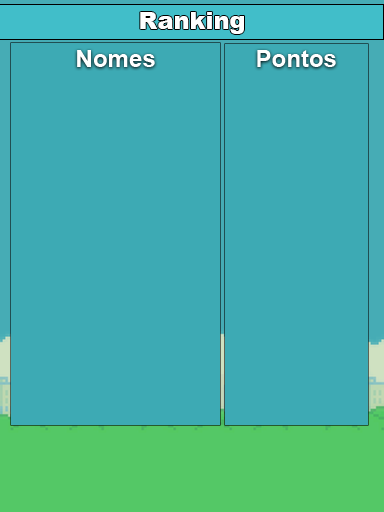
<style>
.page{position:relative;width:384px;height:512px;background:#3daab4}
.page>*{position:absolute;margin:0}
.t1{font:24px "Arial-Black";color:#ffffff}
.t2{font:24px "Arial-BoldMT";color:#ffffff}
</style>
<div class="page">
<p class="t1" style="left:140px;top:12px;width:104px;height:22px">Ranking</p>
<p class="t2" style="left:77px;top:50px;width:78px;height:17px">Nomes</p>
<p class="t2" style="left:257px;top:50px;width:79px;height:17px">Pontos</p>
</div>
